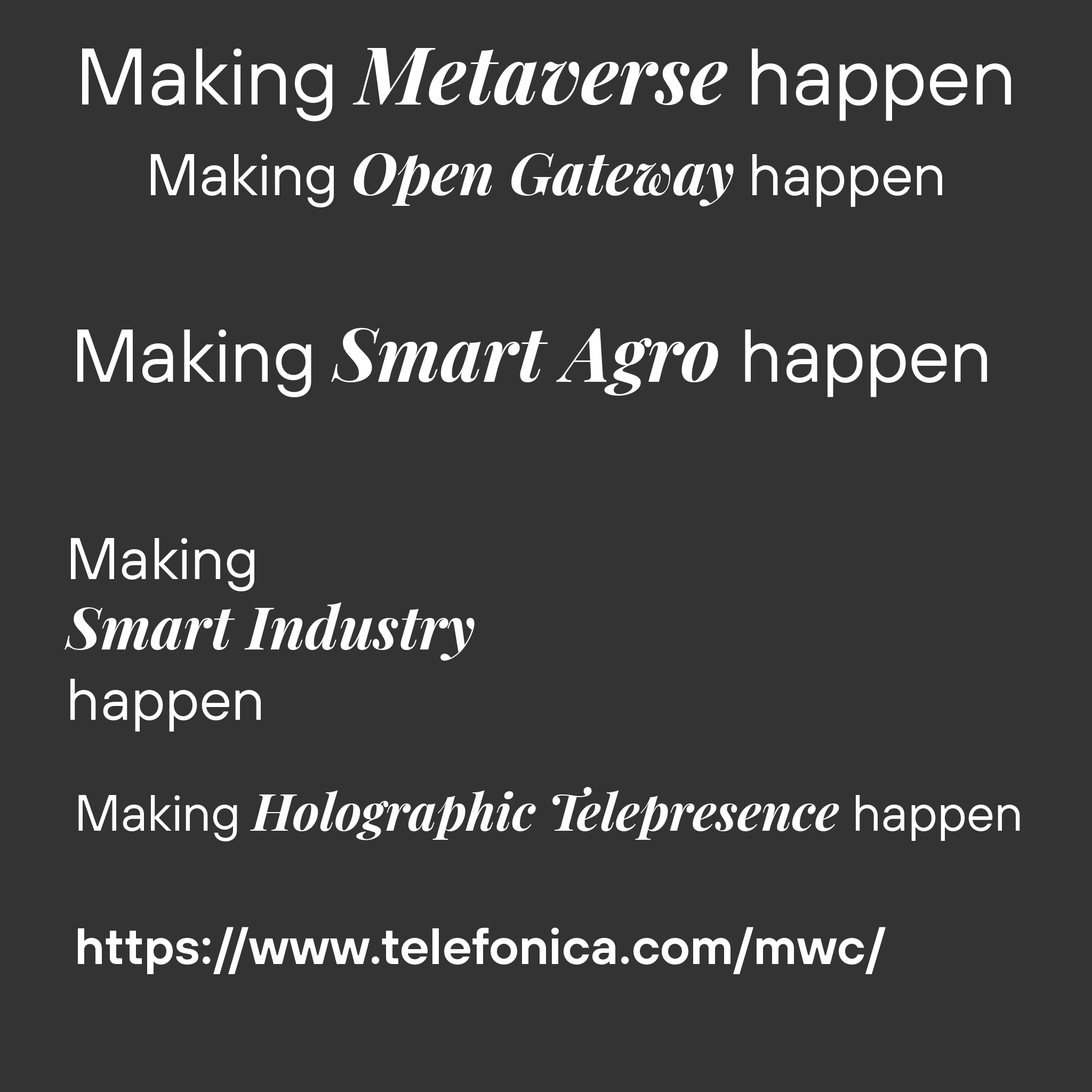
<style>
.page{position:relative;width:1092px;height:1092px;background:#333333}
.page>*{position:absolute;margin:0}
.t1{font:80px "PlayfairDisplay-BoldItalic";color:#ffffff}
.t2{font:80px "TeleSans-Regular";color:#ffffff}
.t3{font:58.7px "PlayfairDisplay-BoldItalic";color:#ffffff}
.t4{font:58.7px "TeleSans-Regular";color:#ffffff}
.t5{font:74.6px "PlayfairDisplay-BoldItalic";color:#ffffff}
.t6{font:74.6px "TeleSans-Regular";color:#ffffff}
.t7{font:50.7px "PlayfairDisplay-BoldItalic";color:#ffffff}
.t8{font:50.7px "TeleSans-Regular";color:#ffffff}
.t9{font:50.7px "TeleSans-DemiBold";color:#ffffff}
</style>
<div class="page">
<p class="t1" style="left:82px;top:48px;width:929px;height:74px"><span class="t2">Making </span>Metaverse<span class="t2"> happen</span></p>
<p class="t3" style="left:151px;top:153px;width:791px;height:54px"><span class="t4">Making </span>Open Gateway<span class="t4"> happen</span></p>
<p class="t5" style="left:77px;top:328px;width:910px;height:69px"><span class="t6">Making </span>Smart Agro <span class="t6">happen</span></p>
<p class="t3" style="left:64px;top:538px;width:411px;height:194px"><span class="t4">Making<br></span>Smart Industry<br><span class="t4">happen</span></p>
<p class="t7" style="left:78px;top:787px;width:942px;height:54px"><span class="t8">Making </span>Holographic Telepresence <span class="t8">happen</span></p>
<p class="t9" style="left:78px;top:927px;width:808px;height:47px">https://www.telefonica.com/mwc/</p>
</div>
